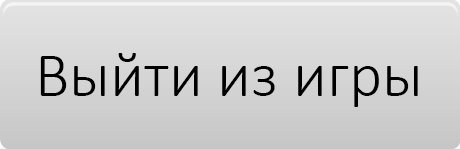
<style>
.page{position:relative;width:460px;height:149px}
.page>*{position:absolute;margin:0}
.t1{font:64px "Calibri-Light";color:#000000}
</style>
<div class="page">
<p class="t1" style="left:40px;top:53px;width:378px;height:54px">Выйти из игры</p>
</div>
